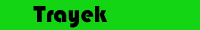
<style>
.page{position:relative;width:200px;height:30px;background:#13d513}
.page>*{position:absolute;margin:0}
.t1{font:24px "Bauhaus93";color:#000000}
</style>
<div class="page">
<p class="t1" style="left:33px;top:6px;width:74px;height:22px">Trayek</p>
</div>
